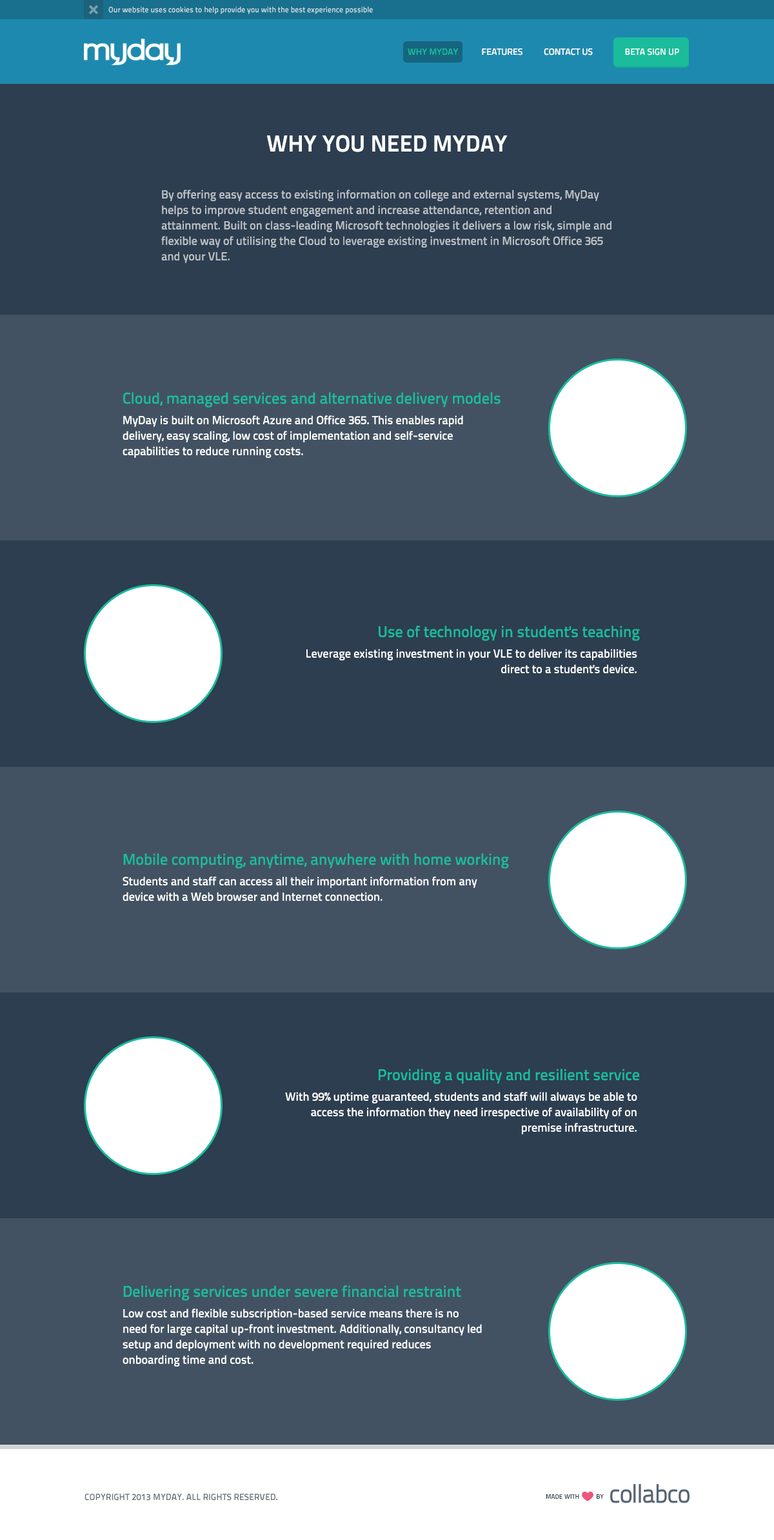
<style>
.page{position:relative;width:774px;height:1540px;background:#2c3e50}
.page>*{position:absolute;margin:0}
.t1{font:7.7px "TitilliumText25L-800wt";color:#cddbe1}
.t2{font:9px "TitilliumText25L-600wt";color:#ffffff}
.t3{font:9px "TitilliumText25L-600wt";color:#1abc9c}
.t4{font:9px "TitilliumText25L-800wt";color:#ffffff;text-transform:uppercase}
.t5{font:23.2px "TitilliumText25L-800wt";color:#ffffff;text-transform:uppercase}
.t6{font:11.6px/15.5px "TitilliumText25L-600wt";color:#bec1c5}
.t7{font:15.5px "TitilliumText25L-600wt";color:#1abc9c}
.t8{font:11.6px/15.5px "TitilliumText25L-600wt";color:#ffffff}
.t9{font:9px "TitilliumText25L-800wt";color:#6a747e;text-transform:uppercase}
.t10{font:6.5px "TitilliumText25L-800wt";color:#2c3e50;text-transform:uppercase}
</style>
<div class="page">
<p class="t1" style="left:108px;top:6px;width:265px;height:8px">Our website uses cookies to help provide you with the best experience possible</p>
<p class="t2" style="left:408px;top:48px;width:185px;height:7px"><span class="t3">WHY MYDAY</span>           FEATURES          CONTACT US</p>
<p class="t4" style="left:625px;top:48px;width:54px;height:7px">Beta Sign Up</p>
<p class="t5" style="left:267px;top:135px;width:241px;height:17px">Why you need myday</p>
<p class="t6" style="left:161px;top:190px;width:451px;height:73px">By offering easy access to existing information on college and external systems, MyDay helps to improve student engagement and increase attendance, retention and attainment. Built on class-leading Microsoft technologies it delivers a low risk, simple and flexible way of utilising the Cloud to leverage existing investment in Microsoft Office 365 and your VLE.</p>
<p class="t7" style="left:123px;top:392px;width:378px;height:16px">Cloud, managed services and alternative delivery models</p>
<p class="t8" style="left:123px;top:415px;width:340px;height:43px">MyDay is built on Microsoft Azure and Office 365. This enables rapid delivery, easy scaling, low cost of implementation and self-service capabilities to reduce running costs.</p>
<p class="t7" style="left:379px;top:626px;width:261px;height:15px">Use of technology in student's teaching</p>
<p class="t8" style="left:306px;top:649px;width:331px;height:24px;text-align:right">Leverage existing investment in your VLE to deliver its capabilities direct to a student's device.</p>
<p class="t7" style="left:123px;top:853px;width:386px;height:16px">Mobile computing, anytime, anywhere with home working</p>
<p class="t8" style="left:123px;top:877px;width:354px;height:24px">Students and staff can access all their important information from any device with a Web browser and Internet connection.</p>
<p class="t7" style="left:379px;top:1069px;width:260px;height:15px">Providing a quality and resilient service</p>
<p class="t8" style="left:285px;top:1092px;width:352px;height:43px;text-align:right">With 99% uptime guaranteed, students and staff will always be able to access the information they need irrespective of availability of on premise infrastructure.</p>
<p class="t7" style="left:123px;top:1286px;width:338px;height:15px">Delivering services under severe financial restraint</p>
<p class="t8" style="left:123px;top:1309px;width:359px;height:58px">Low cost and flexible subscription-based service means there is no need for large capital up-front investment. Additionally, consultancy led setup and deployment with no development required reduces onboarding time and cost.</p>
<p class="t9" style="left:85px;top:1494px;width:192px;height:7px">Copyright 2013 Myday. All rights reserved.</p>
<p class="t10" style="left:546px;top:1495px;width:58px;height:4px">made with           by</p>
</div>
